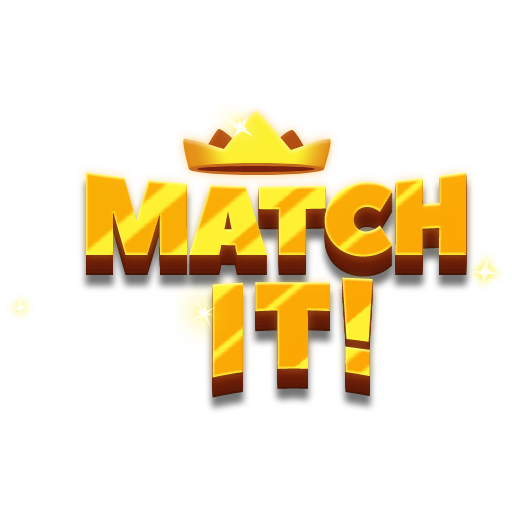
<style>
.page{position:relative;width:512px;height:512px;background:#ffffff}
.page>*{position:absolute;margin:0}
.t1{font:119.8px "PeaceSans";letter-spacing:-0.05em;scale:0.87 1}
.t2{font:134.2px "PeaceSans";letter-spacing:0.025em;color:#fbab06;scale:0.87 1}
</style>
<div class="page">
<p class="t1" style="left:85px;top:172px;width:382px;height:85px">MATCH</p>
<p class="t2" style="left:212px;top:277px;width:161px;height:101px">IT!</p>
</div>
